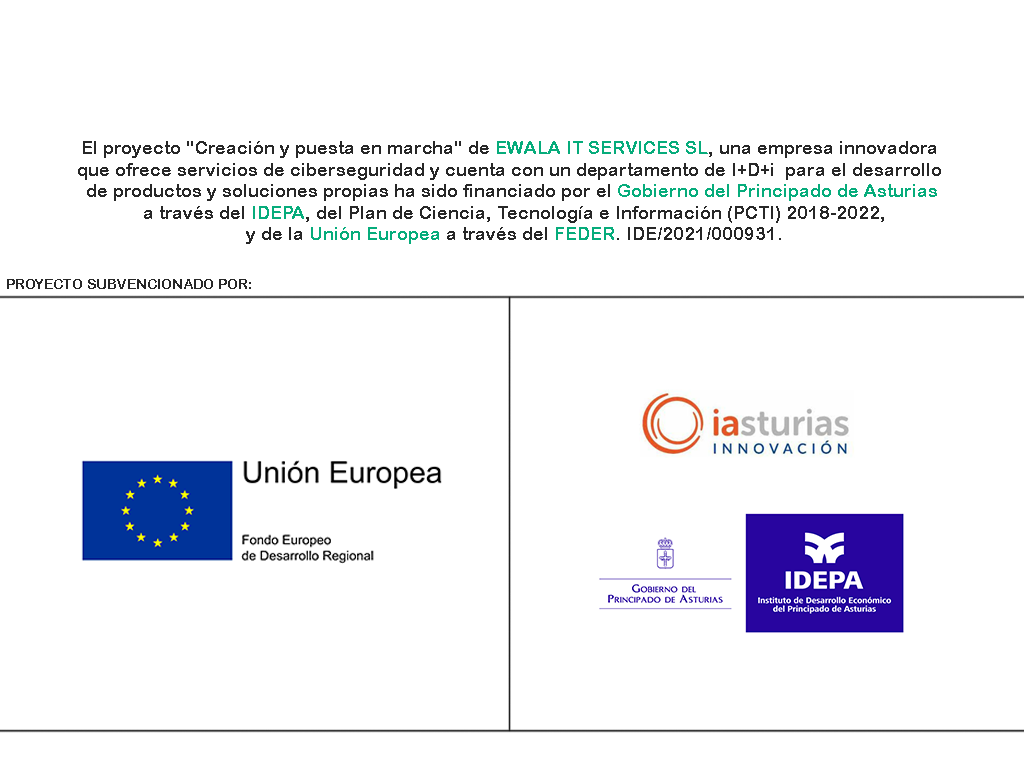
<style>
.page{position:relative;width:1024px;height:768px;background:#ffffff}
.page>*{position:absolute;margin:0}
.t1{font:18px "ArialRoundedMTBold";color:#272727}
.t2{font:18px "ArialRoundedMTBold";color:#06ac7b}
.t3{font:14px "ArialRoundedMTBold";color:#272727}
</style>
<div class="page">
<p class="t1" style="left:78px;top:141px;width:863px;height:103px;text-align:center">El proyecto "Creación y puesta en marcha" de <span class="t2">EWALA IT SERVICES SL</span>, una empresa innovadora <br>que ofrece servicios de ciberseguridad y cuenta con un departamento de I+D+i  para el desarrollo <br>de productos y soluciones propias ha sido financiado por el <span class="t2">Gobierno del Principado de Asturias<br></span> a través del <span class="t2">IDEPA</span>, del Plan de Ciencia, Tecnología e Información (PCTI) 2018-2022,<br> y de la <span class="t2">Unión Europea</span> a través del <span class="t2">FEDER</span>. IDE/2021/000931.</p>
<p class="t3" style="left:7px;top:279px;width:244px;height:10px">PROYECTO SUBVENCIONADO POR:</p>
</div>
